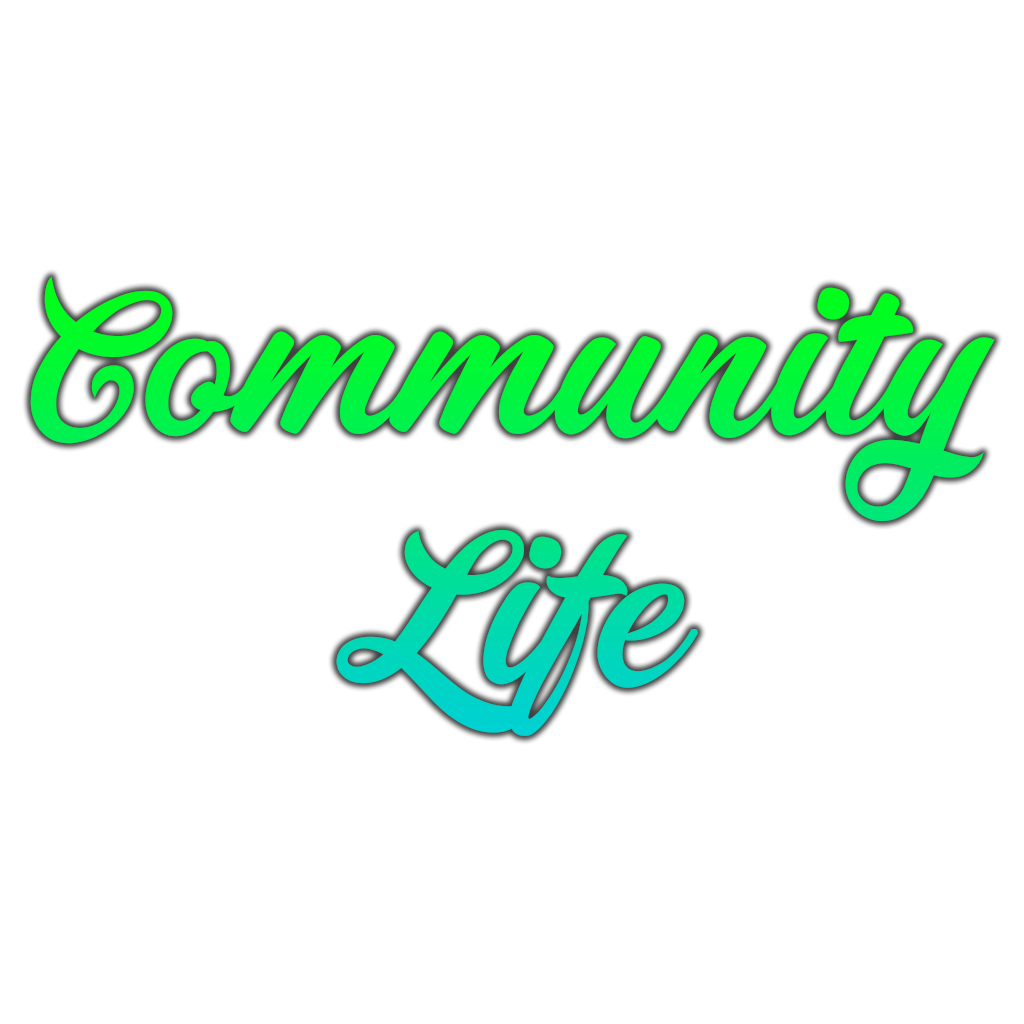
<style>
.page{position:relative;width:1024px;height:1024px;background:#ffffff}
.page>*{position:absolute;margin:0}
.t1{font:207.9px "PainterPERSONALUSEONLY"}
</style>
<div class="page">
<p class="t1" style="left:30px;top:277px;width:965px;height:459px;text-align:center">Community<br>Life</p>
</div>
